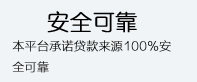
<style>
.page{position:relative;width:197px;height:82px;background:#f0f4f7}
.page>*{position:absolute;margin:0}
.t1{font:22px "YouYuan";color:#000000;font-weight:bold}
.t2{font:12px "FZLTCXHJW--GB1-0";color:#000000;font-weight:bold}
</style>
<div class="page">
<p class="t1" style="left:47px;top:11px;width:90px;height:22px">安全可靠</p>
<p class="t2" style="left:12px;top:40px;width:159px;height:33px">本平台承诺贷款来源100%安<br>全可靠</p>
</div>
